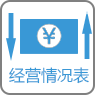
<style>
.page{position:relative;width:95px;height:95px;background:#ffffff}
.page>*{position:absolute;margin:0}
.t1{font:16px "MicrosoftYaHei";color:#3998d6}
</style>
<div class="page">
<p class="t1" style="left:9px;top:67px;width:80px;height:17px">经营情况表</p>
</div>
